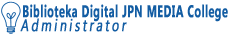
<style>
.page{position:relative;width:233px;height:36px;background:#ffffff}
.page>*{position:absolute;margin:0}
.t1{font:16.9px "MyanmarText-Bold";letter-spacing:0.025em;color:#135da3;font-weight:bold;scale:0.63 1}
</style>
<div class="page">
<p class="t1" style="left:23px;top:4px;width:205px;height:18px">Biblioteka Digital JPN MEDIA College</p>
</div>
